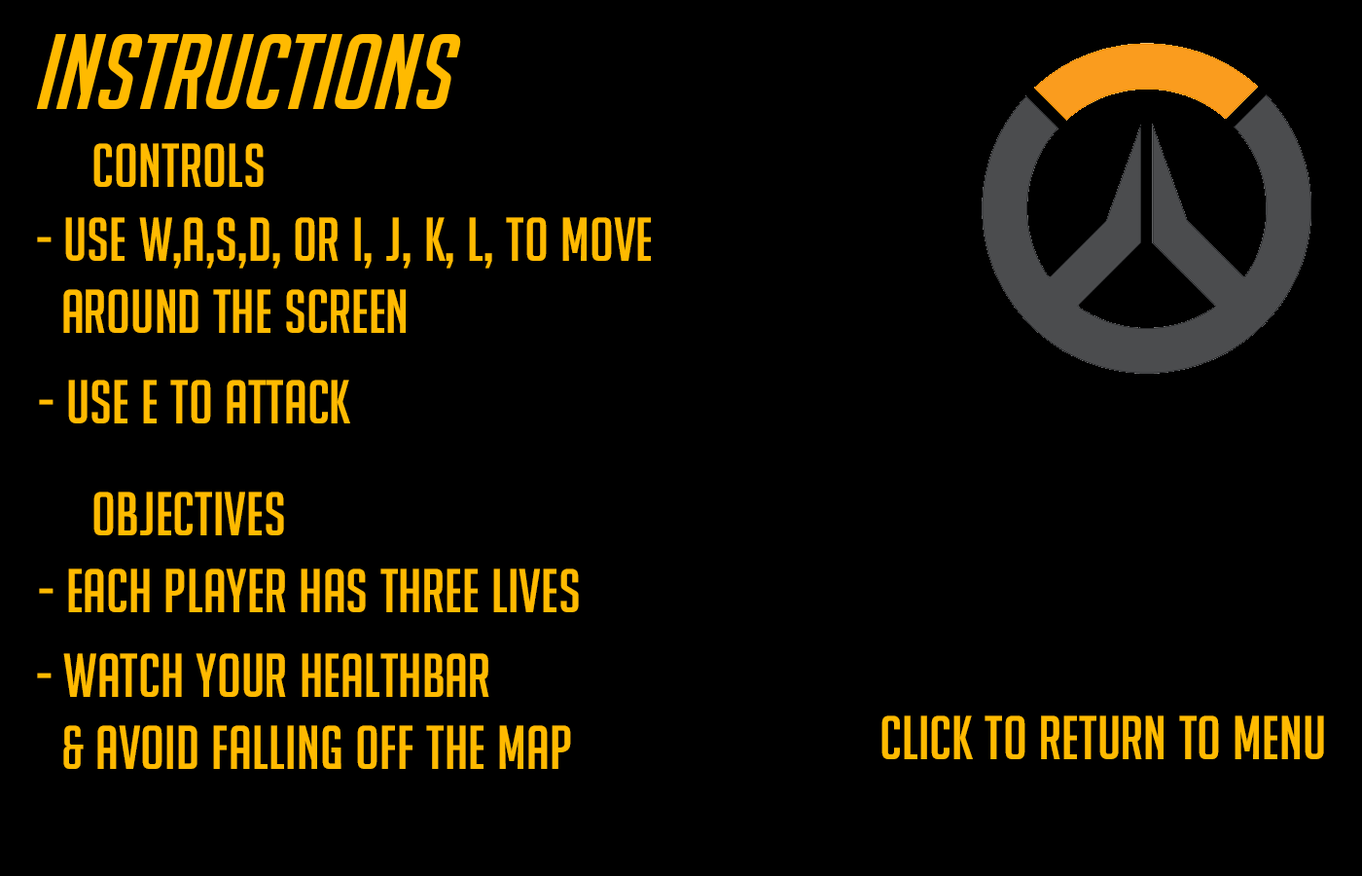
<style>
.page{position:relative;width:1362px;height:876px;background:#000000}
.page>*{position:absolute;margin:0}
.t1{font:104.1px "BigNoodleTooOblique";color:#ffba00}
.t2{font:60.3px "Koverwatch";color:#ffba00}
</style>
<div class="page">
<p class="t1" style="left:36px;top:34px;width:425px;height:75px">Instructions</p>
<p class="t2" style="left:93px;top:143px;width:171px;height:44px">ConTrols</p>
<p class="t2" style="left:37px;top:217px;width:614px;height:116px">- Use W,A,s,D, Or I, J, K, L, To Move <br>  Around The Screen</p>
<p class="t2" style="left:39px;top:379px;width:311px;height:44px">- Use E To Attack</p>
<p class="t2" style="left:93px;top:491px;width:191px;height:44px">Objectives</p>
<p class="t2" style="left:39px;top:568px;width:540px;height:44px">- Each Player Has Three Lives</p>
<p class="t2" style="left:37px;top:653px;width:534px;height:116px">- Watch Your HealthBar <br>  &amp; Avoid Falling Off The MaP</p>
<p class="t2" style="left:881px;top:715px;width:443px;height:44px">Click To Return To MEnu</p>
</div>
